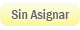
<style>
.page{position:relative;width:80px;height:30px;background:#ffffff}
.page>*{position:absolute;margin:0}
.t1{font:14px "FranklinGothic-MediumCond";color:#666666}
</style>
<div class="page">
<p class="t1" style="left:11px;top:9px;width:59px;height:12px">Sin Asignar</p>
</div>
